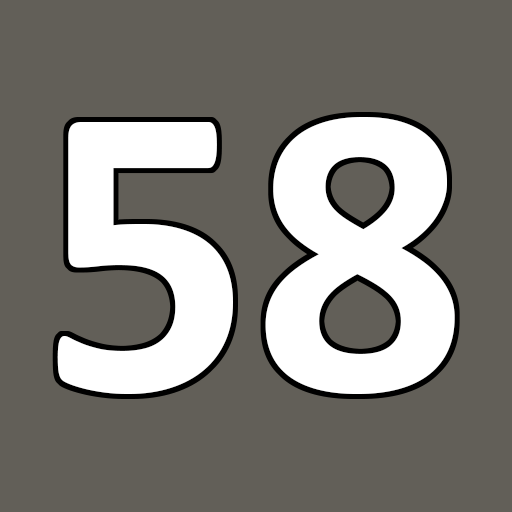
<style>
.page{position:relative;width:512px;height:512px;background:#625f58}
.page>*{position:absolute;margin:0}
.t1{font:423.3px "Calibri-Bold";color:#ffffff}
</style>
<div class="page">
<p class="t1" style="left:57px;top:117px;width:398px;height:277px">58</p>
</div>
